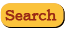
<style>
.page{position:relative;width:65px;height:30px;background:#fbc33c}
.page>*{position:absolute;margin:0}
.t1{font:14.6px "BookmanOldStyle";color:#9a2a14;font-weight:bold}
</style>
<div class="page">
<p class="t1" style="left:5px;top:9px;width:52px;height:12px">Search</p>
</div>
